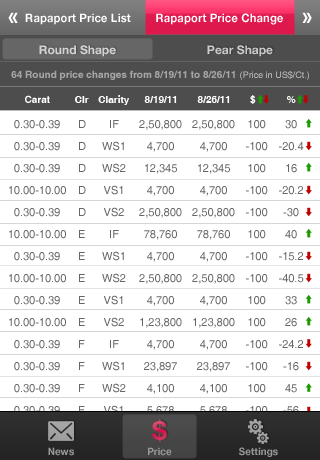
<style>
.page{position:relative;width:320px;height:460px;background:#ffffff}
.page>*{position:absolute;margin:0}
.t1{font:11.5px "HelveticaNeue-Bold";color:#ffffff}
.t2{font:12px "HelveticaNeueBold";color:#cccccc}
.t3{font:12px "HelveticaNeueBold";color:#cbcbcb}
.t4{font:10px "Helvetica-Bold";color:#a6a6a6}
.t5{font:9px "Helvetica"}
.t6{font:10px "Helvetica-Bold";color:#ffffff}
.t7{font:11px/22px "Helvetica";color:#666666}
.t8{font:25.8px "HelveticaNeue-Bold"}
.t9{font:10px "HelveticaNeue-Bold";color:#999999}
</style>
<div class="page">
<p class="t1" style="left:25px;top:13px;width:106px;height:12px">Rapaport Price List</p>
<p class="t1" style="left:156px;top:13px;width:127px;height:12px">Rapaport Price Change</p>
<p class="t2" style="left:39px;top:45px;width:77px;height:12px">Round Shape</p>
<p class="t3" style="left:207px;top:45px;width:66px;height:12px">Pear Shape</p>
<p class="t4" style="left:11px;top:70px;width:224px;height:10px">64 Round price changes from 8/19/11 to 8/26/11</p>
<p class="t5" style="left:240px;top:71px;width:69px;height:9px">(Price in US$/Ct.)</p>
<p class="t6" style="left:25px;top:95px;width:25px;height:8px">Carat</p>
<p class="t6" style="left:75px;top:96px;width:14px;height:7px">Clr</p>
<p class="t6" style="left:98px;top:95px;width:31px;height:10px">Clarity</p>
<p class="t6" style="left:144px;top:96px;width:33px;height:7px">8/19/11</p>
<p class="t6" style="left:197px;top:96px;width:33px;height:7px">8/26/11</p>
<p class="t6" style="left:250px;top:95px;width:6px;height:9px">$</p>
<p class="t6" style="left:287px;top:96px;width:9px;height:7px">%</p>
<p class="t7" style="left:9px;top:120px;width:57px;height:339px;text-align:center">0.30-0.39<br>0.30-0.39<br>0.30-0.39<br>10.00-10.00<br>0.30-0.39<br>10.00-10.00<br>0.30-0.39<br>10.00-10.00<br>0.30-0.39<br>10.00-10.00<br>0.30-0.39<br>0.30-0.39<br>0.30-0.39<br>0.30-0.39<br>0.30-0.39<br>10.00-10.00</p>
<p class="t7" style="left:79px;top:120px;width:7px;height:338px">D<br>D<br>D<br>D<br>D<br>E<br>E<br>E<br>E<br>E<br>F<br>F<br>F<br>F<br>F<br>F</p>
<p class="t7" style="left:102px;top:120px;width:24px;height:338px;text-align:center">IF<br>WS1<br>WS2<br>VS1<br>VS2<br>IF<br>WS1<br>WS2<br>VS1<br>VS2<br>IF<br>WS1<br>WS2<br>VS1<br>VS2<br>IF</p>
<p class="t7" style="left:139px;top:120px;width:43px;height:340px;text-align:center">2,50,800<br>4,700<br>12,345<br>4,700<br>2,50,800<br>78,760<br>4,700<br>2,50,800<br>4,700<br>1,23,800<br>4,700<br>23,897<br>4,100<br>5,678<br>2,700<br>$4,700</p>
<p class="t7" style="left:192px;top:120px;width:43px;height:340px;text-align:center">2,50,800<br>4,700<br>12,345<br>4,700<br>2,50,800<br>78,760<br>4,700<br>2,50,800<br>4,700<br>1,23,800<br>4,700<br>23,897<br>4,100<br>5,678<br>2,700<br>$4,700</p>
<p class="t7" style="left:246px;top:120px;width:22px;height:339px;text-align:center">100<br>-100<br>100<br>-100<br>-100<br>100<br>-100<br>-100<br>100<br>100<br>-100<br>-100<br>100<br>-100<br>100<br>100</p>
<p class="t8" style="left:152px;top:419px;width:15px;height:23px">$</p>
<p class="t9" style="left:48px;top:447px;width:26px;height:9px">News</p>
<p class="t9" style="left:148px;top:447px;width:24px;height:9px">Price</p>
<p class="t9" style="left:239px;top:447px;width:39px;height:10px">Settings</p>
</div>
